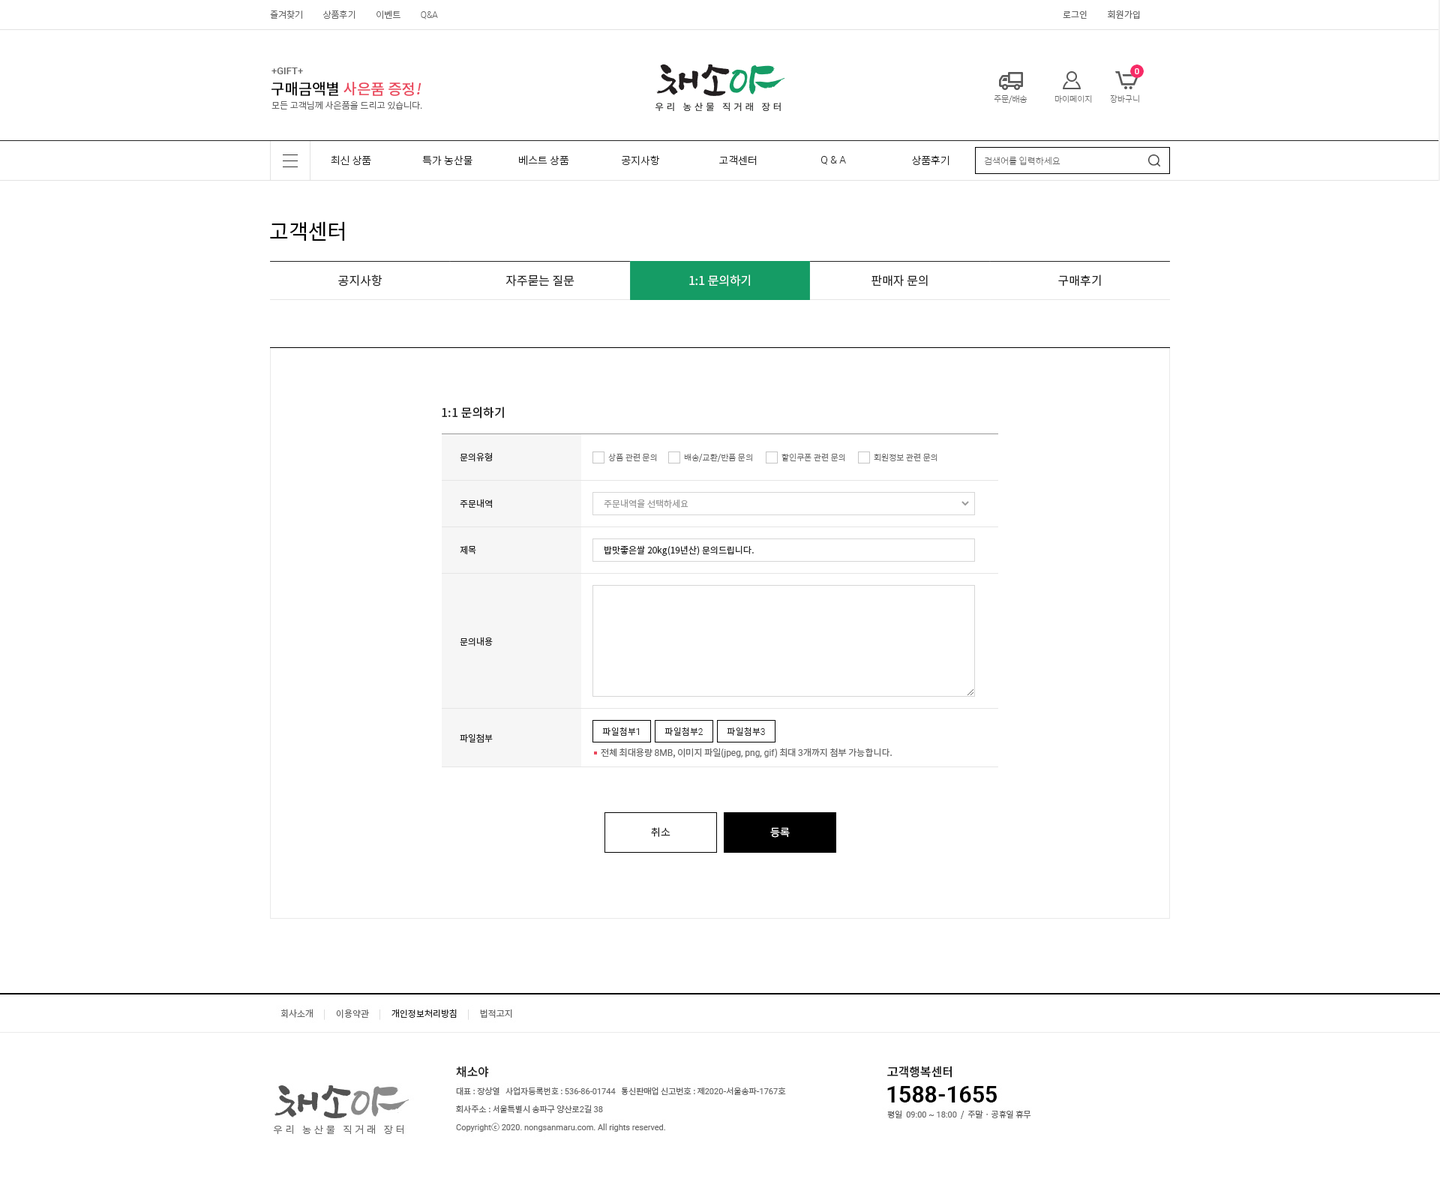
<style>
.page{position:relative;width:1440px;height:1200px;background:#ffffff}
.page>*{position:absolute;margin:0}
.t1{font:9px "NotoSansCJKkr-Light";color:#666666}
.t2{font:9px "Roboto-Light";color:#666666}
.t3{font:9px "NotoSansCJKkr-DemiLight";color:#666666}
.t4{font:9.7px "Roboto-Medium";color:#666666}
.t5{font:15px "NotoSansCJKkr-Medium";color:#ea475c}
.t6{font:15px "NotoSansCJKkr-Medium";color:#000000}
.t7{font:15px "NotoSansCJKkr-Medium";color:#ea475c;font-style:italic}
.t8{font:8.2px "NotoSansCJKkr-Thin";color:#666666}
.t9{font:10.5px "NotoSansCJKkr-Light";color:#222222}
.t10{font:10.5px "Roboto-Light";color:#222222}
.t11{font:9px "NotoSansCJKkr-Thin";color:#666666}
.t12{font:21px "NotoSansCJKkr-Regular";color:#000000}
.t13{font:12px "NotoSansCJKkr-Regular";color:#222222}
.t14{font:12px "NotoSansCJKkr-Regular";color:#ffffff}
.t15{font:12px "NotoSansCJKkr-Medium";color:#222222}
.t16{font:9px "NotoSansCJKkr-Regular";color:#222222}
.t17{font:8.2px "NotoSansCJKkr-Light";color:#666666}
.t18{font:9px "NotoSansCJKkr-Regular";color:#999999}
.t19{font:9px "NotoSansCJKkr-Light";color:#222222}
.t20{font:9px "Roboto-Light";color:#222222}
.t21{font:9px "Roboto-Regular";color:#666666}
.t22{font:9px "NotoSansCJKkr-Regular";color:#666666}
.t23{font:10.5px "NotoSansCJKkr-DemiLight";color:#222222}
.t24{font:10.5px "NotoSansCJKkr-DemiLight";color:#ffffff}
</style>
<div class="page">
<p class="t1" style="left:270px;top:10px;width:168px;height:9px">즐겨찾기          상품후기          이벤트          <span class="t2">Q&amp;A</span></p>
<p class="t3" style="left:1063px;top:10px;width:77px;height:9px">로그인          회원가입</p>
<p class="t4" style="left:271px;top:67px;width:32px;height:7px">+GIFT+</p>
<p class="t5" style="left:271px;top:82px;width:150px;height:14px"><span class="t6">구매금액별 </span>사은품 증정<span class="t7">!</span></p>
<p class="t1" style="left:271px;top:100px;width:151px;height:9px">모든 고객님께 사은품을 드리고 있습니다.</p>
<p class="t8" style="left:994px;top:94px;width:33px;height:9px">주문/배송</p>
<p class="t8" style="left:1054px;top:95px;width:38px;height:8px">마이페이지</p>
<p class="t8" style="left:1110px;top:94px;width:29px;height:9px">장바구니</p>
<p class="t9" style="left:331px;top:155px;width:40px;height:10px">최신 상품</p>
<p class="t9" style="left:422px;top:155px;width:50px;height:11px">특가 농산물</p>
<p class="t9" style="left:519px;top:155px;width:50px;height:11px">베스트 상품</p>
<p class="t9" style="left:622px;top:155px;width:38px;height:11px">공지사항</p>
<p class="t9" style="left:719px;top:155px;width:38px;height:11px">고객센터</p>
<p class="t10" style="left:821px;top:156px;width:25px;height:9px">Q &amp; A</p>
<p class="t9" style="left:912px;top:155px;width:37px;height:11px">상품후기</p>
<p class="t11" style="left:984px;top:156px;width:76px;height:10px">검색어를 입력하세요</p>
<p class="t12" style="left:270px;top:221px;width:74px;height:20px">고객센터</p>
<p class="t13" style="left:338px;top:274px;width:44px;height:12px">공지사항</p>
<p class="t13" style="left:505px;top:274px;width:69px;height:12px">자주묻는 질문</p>
<p class="t14" style="left:689px;top:274px;width:61px;height:12px">1:1 문의하기</p>
<p class="t13" style="left:871px;top:274px;width:57px;height:12px">판매자 문의</p>
<p class="t13" style="left:1058px;top:274px;width:43px;height:12px">구매후기</p>
<p class="t15" style="left:442px;top:406px;width:62px;height:12px">1:1 문의하기</p>
<p class="t16" style="left:460px;top:452px;width:32px;height:10px">문의유형</p>
<p class="t17" style="left:608px;top:453px;width:49px;height:8px">상품 관련 문의</p>
<p class="t17" style="left:684px;top:453px;width:68px;height:9px">배송/교환/반품 문의</p>
<p class="t17" style="left:781px;top:453px;width:64px;height:8px">할인쿠폰 관련 문의</p>
<p class="t17" style="left:874px;top:453px;width:63px;height:8px">회원정보 관련 문의</p>
<p class="t16" style="left:460px;top:499px;width:32px;height:9px">주문내역</p>
<p class="t18" style="left:604px;top:499px;width:84px;height:9px">주문내역을 선택하세요</p>
<p class="t16" style="left:460px;top:545px;width:16px;height:10px">제목</p>
<p class="t16" style="left:604px;top:545px;width:150px;height:11px">밥맛좋은쌀 20kg(19년산) 문의드립니다.</p>
<p class="t16" style="left:460px;top:637px;width:33px;height:9px">문의내용</p>
<p class="t16" style="left:460px;top:733px;width:33px;height:9px">파일첨부</p>
<p class="t19" style="left:602px;top:727px;width:37px;height:9px">파일첨부<span class="t20">1</span></p>
<p class="t19" style="left:664px;top:727px;width:39px;height:9px">파일첨부<span class="t20">2</span></p>
<p class="t19" style="left:727px;top:727px;width:38px;height:9px">파일첨부<span class="t20">3</span></p>
<p class="t21" style="left:601px;top:748px;width:291px;height:10px"><span class="t22">전체 최대용량 </span>8MB<span class="t22">, 이미지 파일(</span>jpeg, png, gif<span class="t22">) 최대 </span>3<span class="t22">개까지 첨부 가능합니다.</span></p>
<p class="t23" style="left:651px;top:827px;width:19px;height:10px">취소</p>
<p class="t24" style="left:770px;top:827px;width:20px;height:11px">등록</p>
</div>
